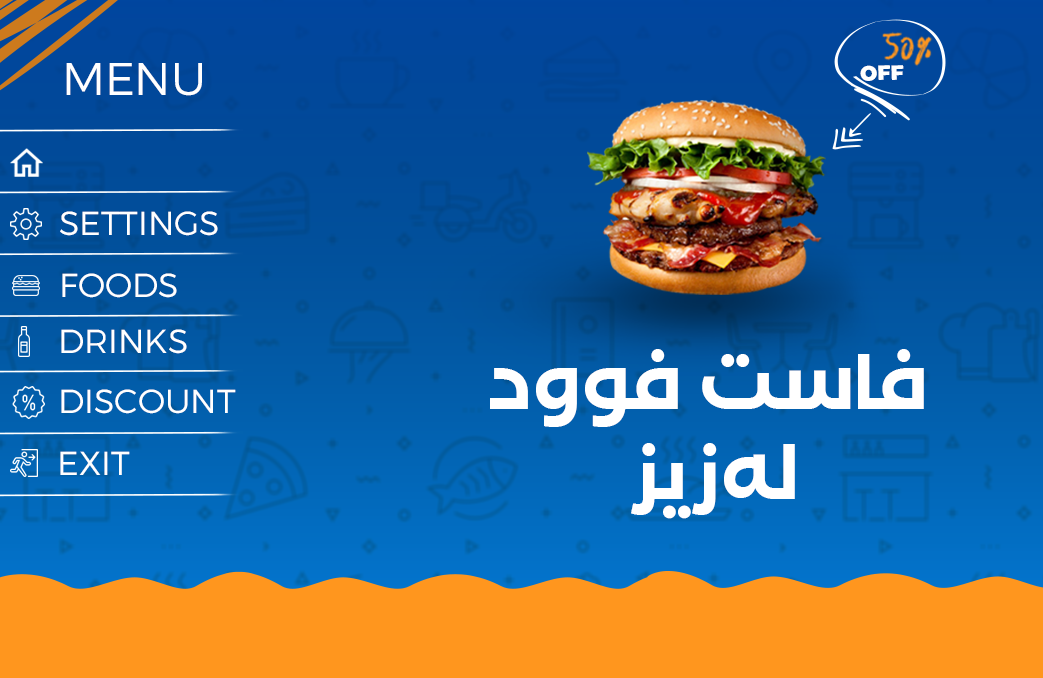
<style>
.page{position:relative;width:1043px;height:678px}
.page>*{position:absolute;margin:0}
.t1{font:44.9px "Amsterdam-Regular";letter-spacing:0.025em;color:#ff961e}
.t2{font:45.8px "DrAbdulWahidMT-Light";color:#ffffff;text-transform:uppercase}
.t3{font:20.4px "Montserrat-Black";color:#ffffff;text-transform:uppercase}
.t4{font:33.3px "DrAbdulWahidMT-Light";color:#ffffff;text-transform:uppercase}
.t5{font:75px "DrAbdulWahidMT-Bold";color:#ffffff;text-transform:uppercase}
</style>
<div class="page">
<p class="t1" style="left:881px;top:31px;width:52px;height:37px;rotate:2deg">50%</p>
<p class="t2" style="left:66px;top:63px;width:136px;height:33px">MENU</p>
<p class="t3" style="left:860px;top:65px;width:44px;height:16px;rotate:-2deg">Off</p>
<p class="t4" style="left:60px;top:211px;width:158px;height:25px">settings</p>
<p class="t4" style="left:62px;top:273px;width:115px;height:25px">foods</p>
<p class="t4" style="left:61px;top:329px;width:126px;height:25px">drinks</p>
<p class="t5" style="left:490px;top:349px;width:434px;height:170px;text-align:center">فاست فوود <br>لەزیز</p>
<p class="t4" style="left:61px;top:389px;width:175px;height:25px">discount</p>
<p class="t4" style="left:60px;top:451px;width:70px;height:24px">EXIt</p>
</div>
